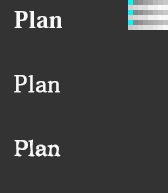
<style>
.page{position:relative;width:168px;height:193px;background:#333333}
.page>*{position:absolute;margin:0}
.t1{font:22px/64px "KozMinPro-Heavy";letter-spacing:0.022em;color:#f8f8f8}
.t2{font:22px/64px "AdobeFangsongStd-Regular";letter-spacing:0.028em;color:#f8f8f8;font-weight:bold}
.t3{font:22px/64px "ComicMysteryStd-DB";letter-spacing:-0.006em;color:#f8f8f8}
</style>
<div class="page">
<p class="t1" style="left:14px;top:11px;width:48px;height:146px">Plan<br><span class="t2">Plan<br></span><span class="t3">Plan</span></p>
</div>
